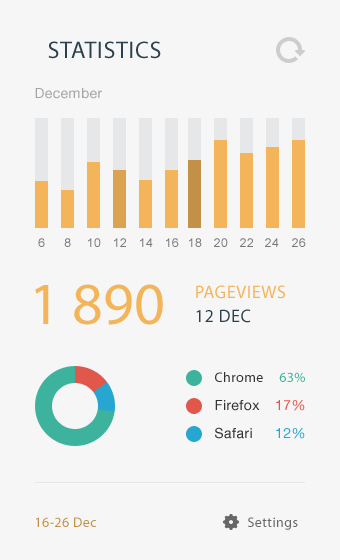
<style>
.page{position:relative;width:340px;height:560px;background:#f6f6f6}
.page>*{position:absolute;margin:0}
.t1{font:24px "MyriadPro-Regular";letter-spacing:0.03em;color:#2b414d;text-transform:uppercase}
.t2{font:14px "HelveticaNeue";letter-spacing:0.03em;color:#a4a4a4}
.t3{font:12px "ArialMT";letter-spacing:0.03em;color:#777777}
.t4{font:60px "MyriadPro-Regular";color:#f4b459}
.t5{font:18px "MyriadPro-Regular";letter-spacing:0.03em;color:#f4b459;text-transform:uppercase}
.t6{font:18px "MyriadPro-Regular";letter-spacing:0.03em;color:#2b414d;text-transform:uppercase}
.t7{font:14px "MyriadPro-Regular";letter-spacing:0.03em;color:#333333}
.t8{font:14px "MyriadPro-Regular";letter-spacing:0.03em;color:#3db39e}
.t9{font:14px "HelveticaNeue";letter-spacing:0.03em;color:#333333}
.t10{font:14px "HelveticaNeue";letter-spacing:0.03em;color:#e2574c}
.t11{font:14px "HelveticaNeue";letter-spacing:0.03em;color:#26a6d1}
.t12{font:14px "MyriadPro-Regular";letter-spacing:0.03em;color:#c39047}
.t13{font:14px "MyriadPro-Regular";letter-spacing:0.03em;color:#676767}
</style>
<div class="page">
<p class="t1" style="left:48px;top:41px;width:113px;height:18px">Statistics</p>
<p class="t2" style="left:35px;top:88px;width:67px;height:11px">December</p>
<p class="t3" style="left:38px;top:238px;width:7px;height:9px">6</p>
<p class="t3" style="left:64px;top:238px;width:7px;height:9px">8</p>
<p class="t3" style="left:88px;top:238px;width:13px;height:9px">10</p>
<p class="t3" style="left:114px;top:238px;width:12px;height:9px">12</p>
<p class="t3" style="left:140px;top:238px;width:13px;height:9px">14</p>
<p class="t3" style="left:166px;top:238px;width:13px;height:9px">16</p>
<p class="t3" style="left:189px;top:238px;width:13px;height:9px">18</p>
<p class="t3" style="left:214px;top:238px;width:14px;height:9px">20</p>
<p class="t3" style="left:240px;top:238px;width:13px;height:9px">22</p>
<p class="t3" style="left:265px;top:238px;width:14px;height:9px">24</p>
<p class="t3" style="left:292px;top:238px;width:14px;height:9px">26</p>
<p class="t4" style="left:35px;top:284px;width:128px;height:41px">1 890</p>
<p class="t5" style="left:196px;top:285px;width:89px;height:14px">Pageviews</p>
<p class="t6" style="left:196px;top:309px;width:55px;height:14px">12 dec</p>
<p class="t7" style="left:215px;top:372px;width:48px;height:10px">Chrome</p>
<p class="t8" style="left:279px;top:372px;width:26px;height:10px">63%</p>
<p class="t9" style="left:215px;top:400px;width:45px;height:11px">Firefox</p>
<p class="t10" style="left:276px;top:400px;width:29px;height:11px">17%</p>
<p class="t9" style="left:215px;top:427px;width:37px;height:12px">Safari</p>
<p class="t11" style="left:276px;top:428px;width:29px;height:11px">12%</p>
<p class="t12" style="left:36px;top:517px;width:60px;height:10px">16-26 Dec</p>
<p class="t13" style="left:248px;top:517px;width:50px;height:13px">Settings</p>
</div>
